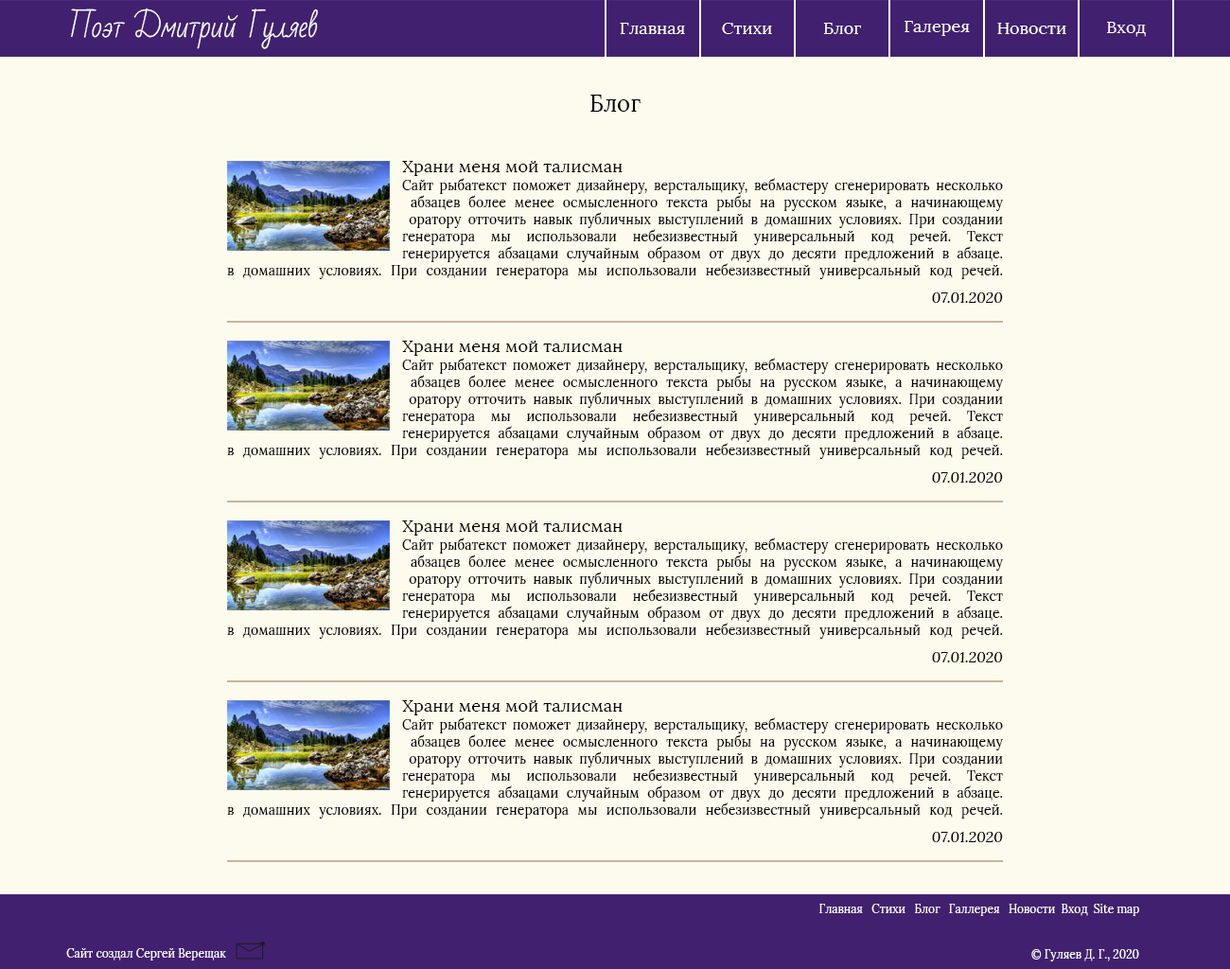
<style>
.page{position:relative;width:1230px;height:969px;background:#fdfbed}
.page>*{position:absolute;margin:0}
.t1{font:28.4px "BadScript-Regular";color:#ffffff}
.t2{font:17px "Lora-Regular";color:#ffffff}
.t3{font:22.7px "Lora-Regular";letter-spacing:0.005em;color:#000000}
.t4{font:17px "Lora-Regular";letter-spacing:0.005em;color:#000000}
.t5{font:13.3px/17px "Lora-Regular";letter-spacing:0.005em;color:#000000}
.t6{font:15.1px "Lora-Italic";letter-spacing:0.005em;color:#000000}
.t7{font:11.4px "Lora-Regular";color:#ffffff}
</style>
<div class="page">
<p class="t1" style="left:71px;top:8px;width:247px;height:41px">Поэт Дмитрий Гуляев</p>
<p class="t2" style="left:620px;top:23px;width:65px;height:11px">Главная</p>
<p class="t2" style="left:722px;top:23px;width:50px;height:11px">Стихи</p>
<p class="t2" style="left:823px;top:23px;width:38px;height:11px">Блог</p>
<p class="t2" style="left:905px;top:21px;width:65px;height:15px">Галерея</p>
<p class="t2" style="left:998px;top:23px;width:69px;height:11px">Новости</p>
<p class="t2" style="left:1107px;top:22px;width:39px;height:15px">Вход</p>
<p class="t3" style="left:591px;top:95px;width:50px;height:17px">Блог</p>
<p class="t4" style="left:402px;top:161px;width:221px;height:15px">Храни меня мой талисман</p>
<p class="t5" style="left:227px;top:178px;width:776px;height:101px;text-align:justify">Сайт рыбатекст поможет дизайнеру, верстальщику, вебмастеру сгенерировать несколько<br> абзацев более менее осмысленного текста рыбы на русском языке, а начинающему<br> оратору отточить навык публичных выступлений в домашних условиях. При создании <br>генератора мы использовали небезизвестный универсальный код речей. Текст <br>генерируется абзацами случайным образом от двух до десяти предложений в абзаце.<br>в домашних условиях. При создании генератора мы использовали небезизвестный универсальный код речей.</p>
<p class="t6" style="left:932px;top:292px;width:71px;height:11px">07.01.2020</p>
<p class="t4" style="left:402px;top:341px;width:221px;height:15px">Храни меня мой талисман</p>
<p class="t5" style="left:227px;top:358px;width:776px;height:101px;text-align:justify">Сайт рыбатекст поможет дизайнеру, верстальщику, вебмастеру сгенерировать несколько<br> абзацев более менее осмысленного текста рыбы на русском языке, а начинающему<br> оратору отточить навык публичных выступлений в домашних условиях. При создании <br>генератора мы использовали небезизвестный универсальный код речей. Текст <br>генерируется абзацами случайным образом от двух до десяти предложений в абзаце.<br>в домашних условиях. При создании генератора мы использовали небезизвестный универсальный код речей.</p>
<p class="t6" style="left:932px;top:472px;width:71px;height:11px">07.01.2020</p>
<p class="t4" style="left:402px;top:521px;width:221px;height:15px">Храни меня мой талисман</p>
<p class="t5" style="left:227px;top:538px;width:776px;height:101px;text-align:justify">Сайт рыбатекст поможет дизайнеру, верстальщику, вебмастеру сгенерировать несколько<br> абзацев более менее осмысленного текста рыбы на русском языке, а начинающему<br> оратору отточить навык публичных выступлений в домашних условиях. При создании <br>генератора мы использовали небезизвестный универсальный код речей. Текст <br>генерируется абзацами случайным образом от двух до десяти предложений в абзаце.<br>в домашних условиях. При создании генератора мы использовали небезизвестный универсальный код речей.</p>
<p class="t6" style="left:932px;top:652px;width:71px;height:11px">07.01.2020</p>
<p class="t4" style="left:402px;top:700px;width:221px;height:16px">Храни меня мой талисман</p>
<p class="t5" style="left:227px;top:717px;width:776px;height:102px;text-align:justify">Сайт рыбатекст поможет дизайнеру, верстальщику, вебмастеру сгенерировать несколько<br> абзацев более менее осмысленного текста рыбы на русском языке, а начинающему<br> оратору отточить навык публичных выступлений в домашних условиях. При создании <br>генератора мы использовали небезизвестный универсальный код речей. Текст <br>генерируется абзацами случайным образом от двух до десяти предложений в абзаце.<br>в домашних условиях. При создании генератора мы использовали небезизвестный универсальный код речей.</p>
<p class="t6" style="left:932px;top:832px;width:71px;height:10px">07.01.2020</p>
<p class="t7" style="left:820px;top:904px;width:320px;height:12px">Главная   Стихи   Блог   Галлерея   Новости  Вход  Site map</p>
<p class="t7" style="left:66px;top:948px;width:160px;height:13px">Сайт создал Сергей Верещак</p>
<p class="t7" style="left:1032px;top:949px;width:108px;height:13px">© Гуляев Д. Г., 2020</p>
</div>
